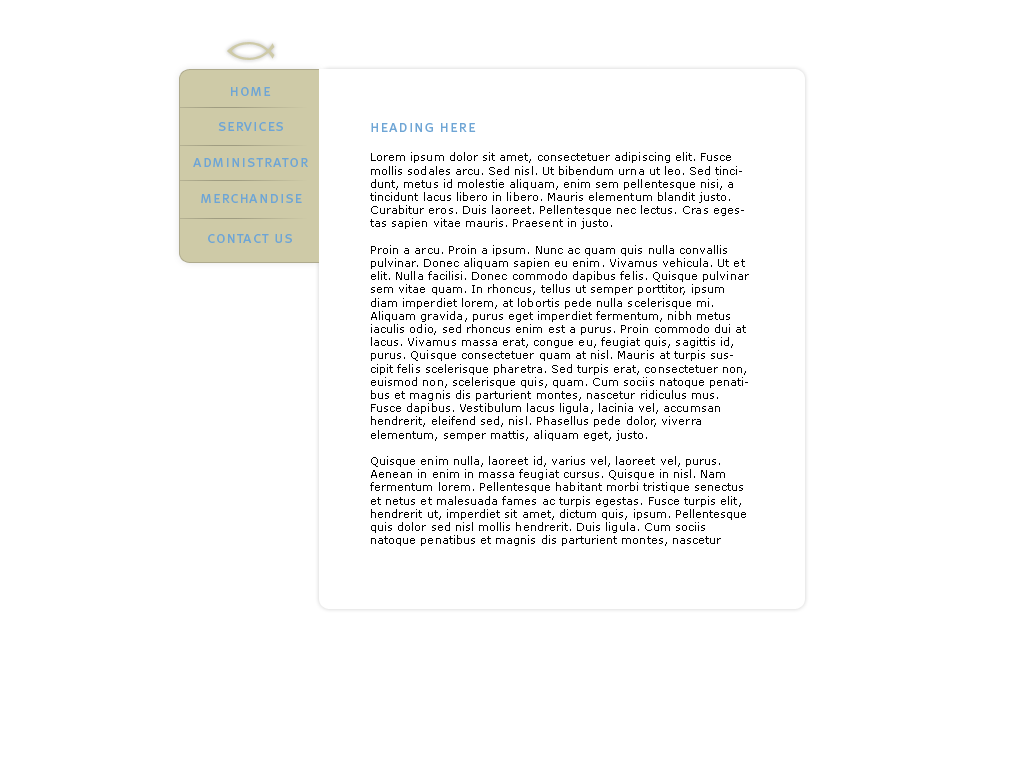
<style>
.page{position:relative;width:1024px;height:768px;background:#ffffff}
.page>*{position:absolute;margin:0}
.t1{font:15.9px "MetaPro-Normal";letter-spacing:0.05em;color:#6ea5d5;font-variant:small-caps}
.t2{font:11px "Verdana";letter-spacing:0.005em;color:#000000}
</style>
<div class="page">
<p class="t1" style="left:231px;top:87px;width:40px;height:9px">home</p>
<p class="t1" style="left:218px;top:122px;width:65px;height:9px">services</p>
<p class="t1" style="left:371px;top:123px;width:105px;height:9px">heading here</p>
<p class="t1" style="left:193px;top:158px;width:115px;height:9px">administrator</p>
<p class="t2" style="left:370px;top:152px;width:379px;height:394px">Lorem ipsum dolor sit amet, consectetuer adipiscing elit. Fusce mollis sodales arcu. Sed nisl. Ut bibendum urna ut leo. Sed tincidunt, metus id molestie aliquam, enim sem pellentesque nisi, a tincidunt lacus libero in libero. Mauris elementum blandit justo. Curabitur eros. Duis laoreet. Pellentesque nec lectus. Cras egestas sapien vitae mauris. Praesent in justo.<br><br>Proin a arcu. Proin a ipsum. Nunc ac quam quis nulla convallis pulvinar. Donec aliquam sapien eu enim. Vivamus vehicula. Ut et elit. Nulla facilisi. Donec commodo dapibus felis. Quisque pulvinar sem vitae quam. In rhoncus, tellus ut semper porttitor, ipsum diam imperdiet lorem, at lobortis pede nulla scelerisque mi. Aliquam gravida, purus eget imperdiet fermentum, nibh metus iaculis odio, sed rhoncus enim est a purus. Proin commodo dui at lacus. Vivamus massa erat, congue eu, feugiat quis, sagittis id, purus. Quisque consectetuer quam at nisl. Mauris at turpis suscipit felis scelerisque pharetra. Sed turpis erat, consectetuer non, euismod non, scelerisque quis, quam. Cum sociis natoque penatibus et magnis dis parturient montes, nascetur ridiculus mus. Fusce dapibus. Vestibulum lacus ligula, lacinia vel, accumsan hendrerit, eleifend sed, nisl. Phasellus pede dolor, viverra elementum, semper mattis, aliquam eget, justo.<br><br>Quisque enim nulla, laoreet id, varius vel, laoreet vel, purus. Aenean in enim in massa feugiat cursus. Quisque in nisl. Nam fermentum lorem. Pellentesque habitant morbi tristique senectus et netus et malesuada fames ac turpis egestas. Fusce turpis elit, hendrerit ut, imperdiet sit amet, dictum quis, ipsum. Pellentesque quis dolor sed nisl mollis hendrerit. Duis ligula. Cum sociis natoque penatibus et magnis dis parturient montes, nascetur ridiculus mus. Aliquam consectetuer euismod orci. Pellentesque fermentum leo. Nulla facilisi.<br><br>Vivamus porta, leo non convallis lobortis, eros felis hendrerit mi, at molestie turpis dolor id sem. Sed ut quam. Vivamus lacinia purus et felis. Morbi sit amet tellus eget mauris porta condimentum. Nulla odio eros, sollicitudin et, ultrices quis, gravida non, leo. Cum sociis natoque penatibus et magnis dis parturient montes, nascetur ridiculus mus. Donec consequat, elit et commodo consectetuer, eros turpis dictum eros, sit amet ultrices quam nunc at sem. Nam ipsum. Aliquam turpis turpis, iaculis id, viverra at, feugiat nec, turpis. Curabitur ornare. Ut condimentum justo in justo. Vivamus orci ipsum, bibendum et, vehicula sed, luctus et, lacus. Suspendisse potenti. Morbi condimentum iaculis nibh. Vestibulum non augue. Nam ac felis. Vestibulum ante ipsum primis in faucibus orci luctus et ultrices posuere cubilia Curae;</p>
<p class="t1" style="left:201px;top:194px;width:101px;height:9px">merchandise</p>
<p class="t1" style="left:208px;top:234px;width:84px;height:9px">contact us</p>
</div>
